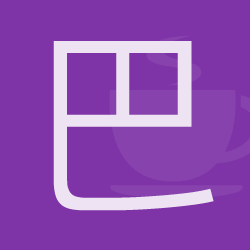
<style>
.page{position:relative;width:250px;height:250px;background:#7e34a7}
.page>*{position:absolute;margin:0}
.t1{font:213.4px "AritaHeiti-Medium";color:#ede3f3}
</style>
<div class="page">
<p class="t1" style="left:53px;top:41px;width:161px;height:170px">巴</p>
</div>
